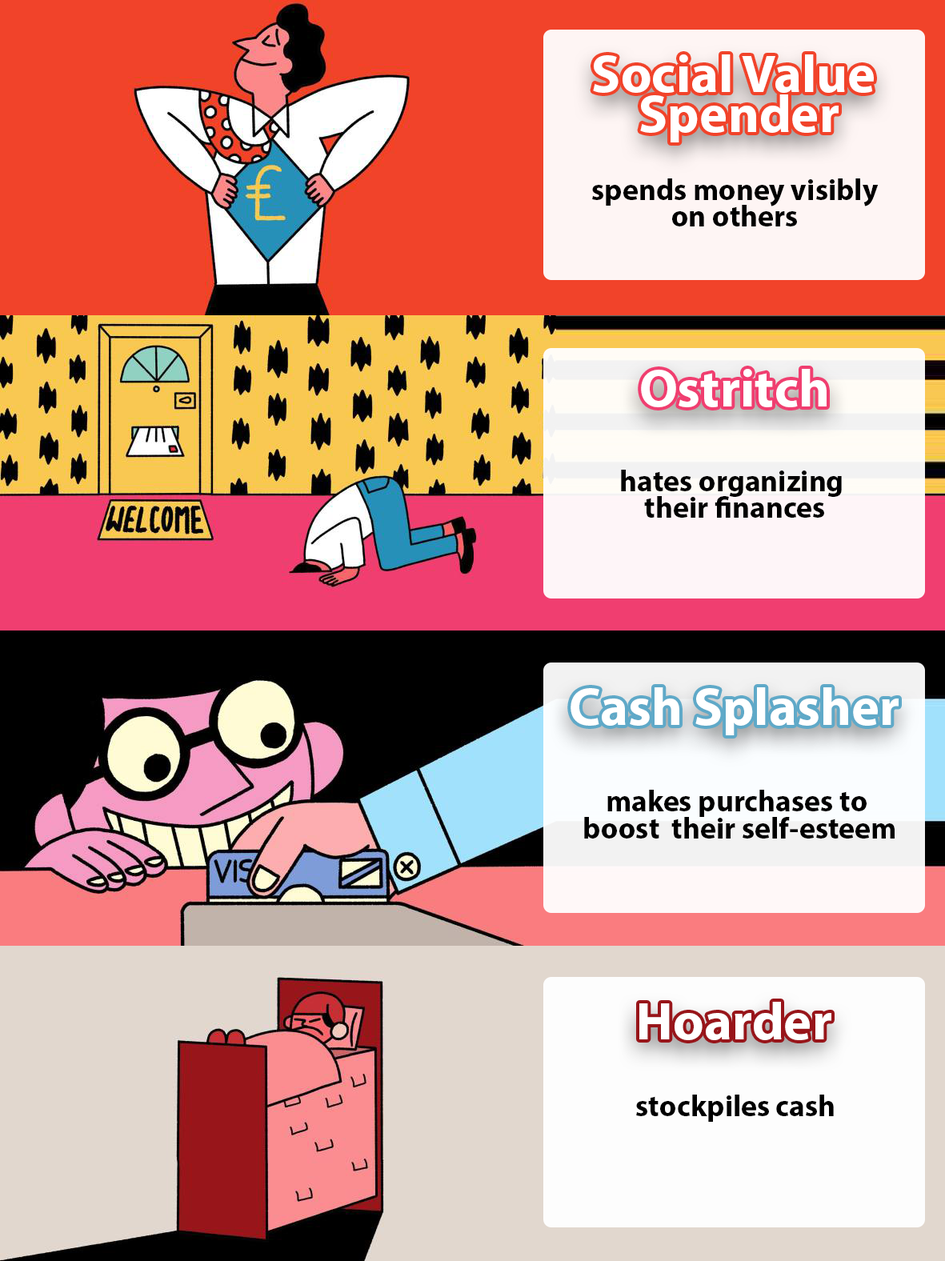
<style>
.page{position:relative;width:945px;height:1261px}
.page>*{position:absolute;margin:0}
.t1{font:53.4px/40px "MyriadPro-Bold";color:#ffffff}
.t2{font:30px/26.7px "MyriadPro-Bold";color:#000000}
.t3{font:53.4px "MyriadPro-Bold";color:#ffffff}
.t4{font:30px "MyriadPro-Bold";color:#000000}
</style>
<div class="page">
<p class="t1" style="left:593px;top:54px;width:281px;height:88px;text-align:center">Social Value <br>Spender</p>
<p class="t2" style="left:592px;top:178px;width:287px;height:49px;text-align:center">spends money visibly<br>on others</p>
<p class="t3" style="left:641px;top:369px;width:186px;height:38px">Ostritch</p>
<p class="t2" style="left:621px;top:470px;width:221px;height:48px;text-align:center">hates organizing <br>their finances</p>
<p class="t3" style="left:571px;top:688px;width:328px;height:48px">Cash Splasher</p>
<p class="t2" style="left:584px;top:790px;width:311px;height:49px;text-align:center">makes purchases to <br>boost  their self-esteem</p>
<p class="t3" style="left:640px;top:1002px;width:192px;height:39px">Hoarder</p>
<p class="t4" style="left:636px;top:1095px;width:198px;height:27px">stockpiles cash</p>
</div>
